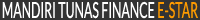
<style>
.page{position:relative;width:200px;height:20px;background:#333333}
.page>*{position:absolute;margin:0}
.t1{font:22.1px "Lato-Regular";color:#ffffff;scale:0.56 1}
.t2{font:22.1px "Lato-Regular";color:#fd9a00;scale:0.56 1}
</style>
<div class="page">
<p class="t1" style="left:2px;top:1px;width:196px;height:18px">MANDIRI TUNAS FINANCE <span class="t2">E-STAR</span></p>
</div>
